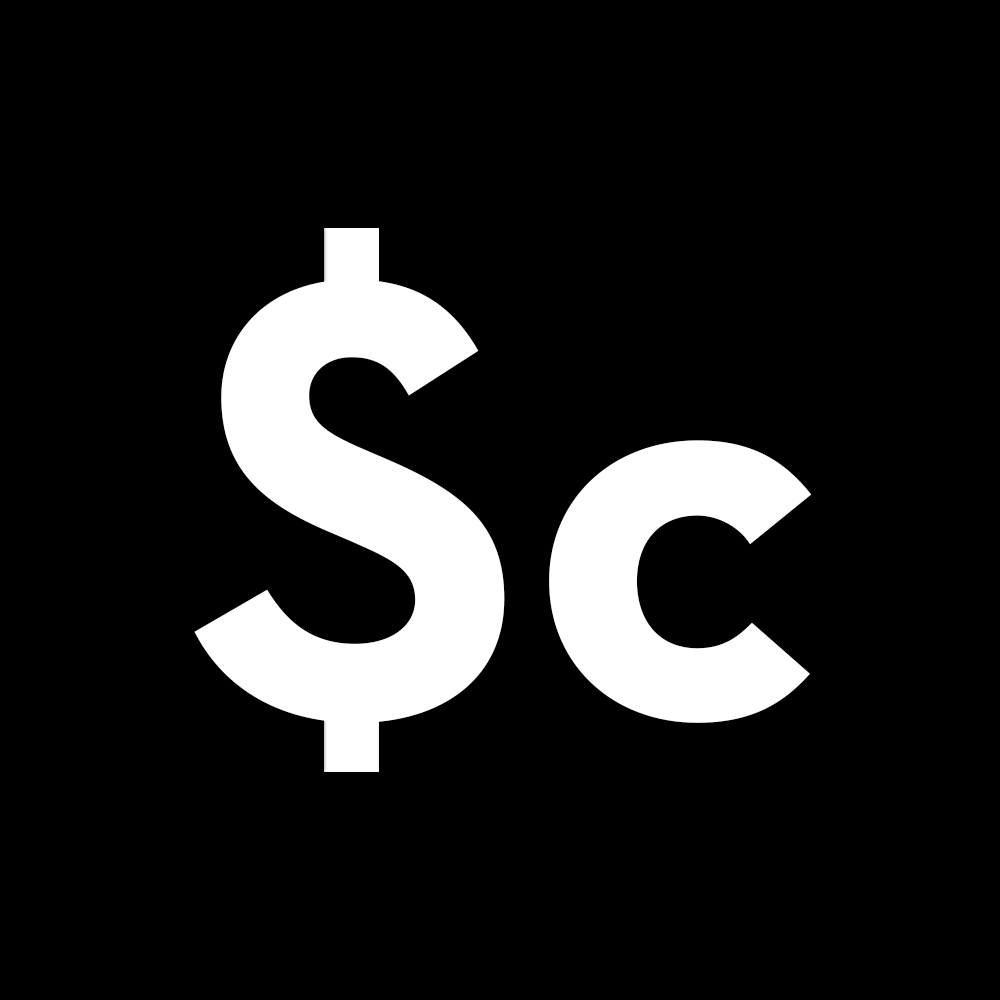
<style>
.page{position:relative;width:1000px;height:1000px;background:#000000}
.page>*{position:absolute;margin:0}
.t1{font:635.7px "NeutraText-Bold";letter-spacing:-0.005em;color:#ffffff}
</style>
<div class="page">
<p class="t1" style="left:194px;top:279px;width:618px;height:444px">Sc</p>
</div>
